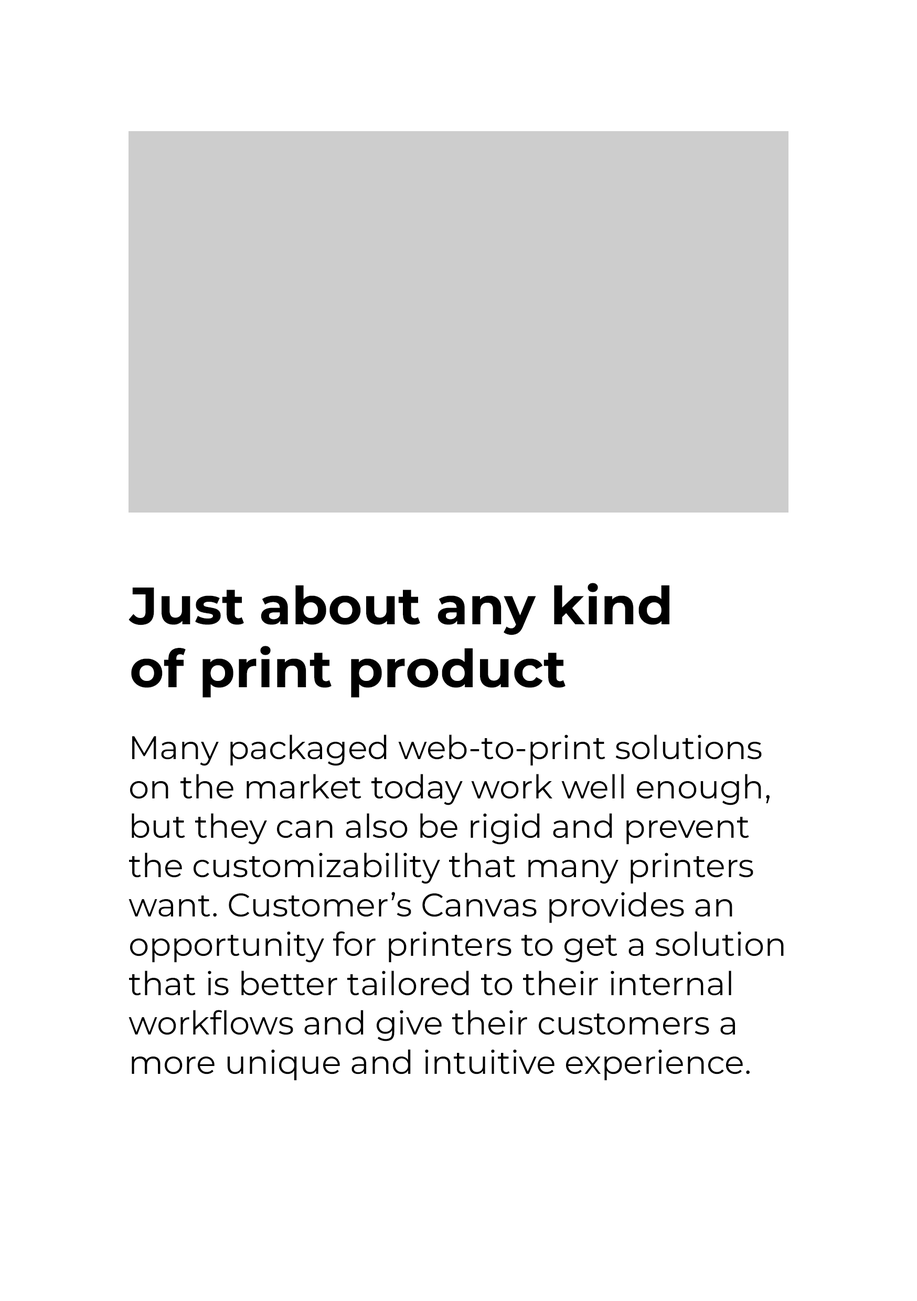
<style>
.page{position:relative;width:917px;height:1301px;background:#ffffff}
.page>*{position:absolute;margin:0}
.t1{font:52.4px "Montserrat-Bold";color:#000000}
.t2{font:32.8px "Montserrat-Regular";color:#000000}
</style>
<div class="page">
<p class="t1" style="left:128px;top:583px;width:541px;height:115px">Just about any kind<br>of print product</p>
<p class="t2" style="left:128px;top:734px;width:656px;height:346px">Many packaged web-to-print solutions on the market today work well enough, but they can also be rigid and prevent the customizability that many printers want. Customer’s Canvas provides an opportunity for printers to get a solution that is better tailored to their internal workflows and give their customers a more unique and intuitive experience.</p>
</div>
